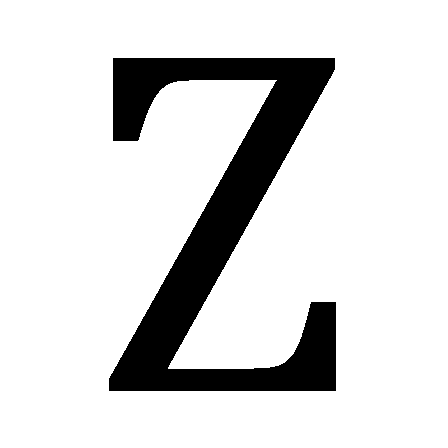
<style>
.page{position:relative;width:448px;height:448px;background:#ffffff}
.page>*{position:absolute;margin:0}
.t1{font:500.1px "Cambria";letter-spacing:-0.1em;color:#000000}
</style>
<div class="page">
<p class="t1" style="left:109px;top:58px;width:227px;height:333px">Z</p>
</div>
